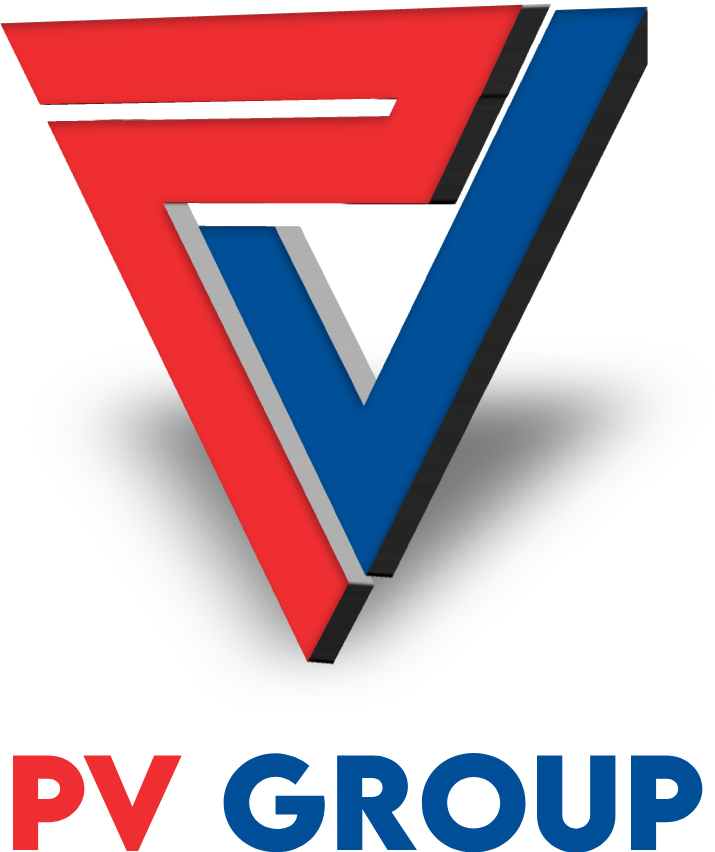
<style>
.page{position:relative;width:715px;height:852px;background:#ffffff}
.page>*{position:absolute;margin:0}
.t1{font:120px "LEMONMILK-Bold";color:#004f98;text-transform:uppercase}
.t2{font:120px "LEMONMILK-Bold";color:#ee2e31;text-transform:uppercase}
</style>
<div class="page">
<p class="t1" style="left:13px;top:753px;width:690px;height:100px"><span class="t2">PV </span>Group</p>
</div>
